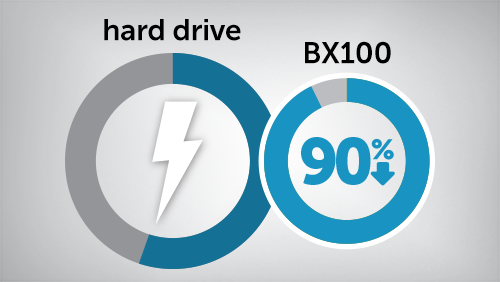
<style>
.page{position:relative;width:500px;height:282px}
.page>*{position:absolute;margin:0}
.t1{font:30px "MuseoSans-700";letter-spacing:-0.01em;color:#000000}
</style>
<div class="page">
<p class="t1" style="left:104px;top:19px;width:137px;height:22px">hard drive</p>
<p class="t1" style="left:305px;top:41px;width:86px;height:23px">BX100</p>
</div>
